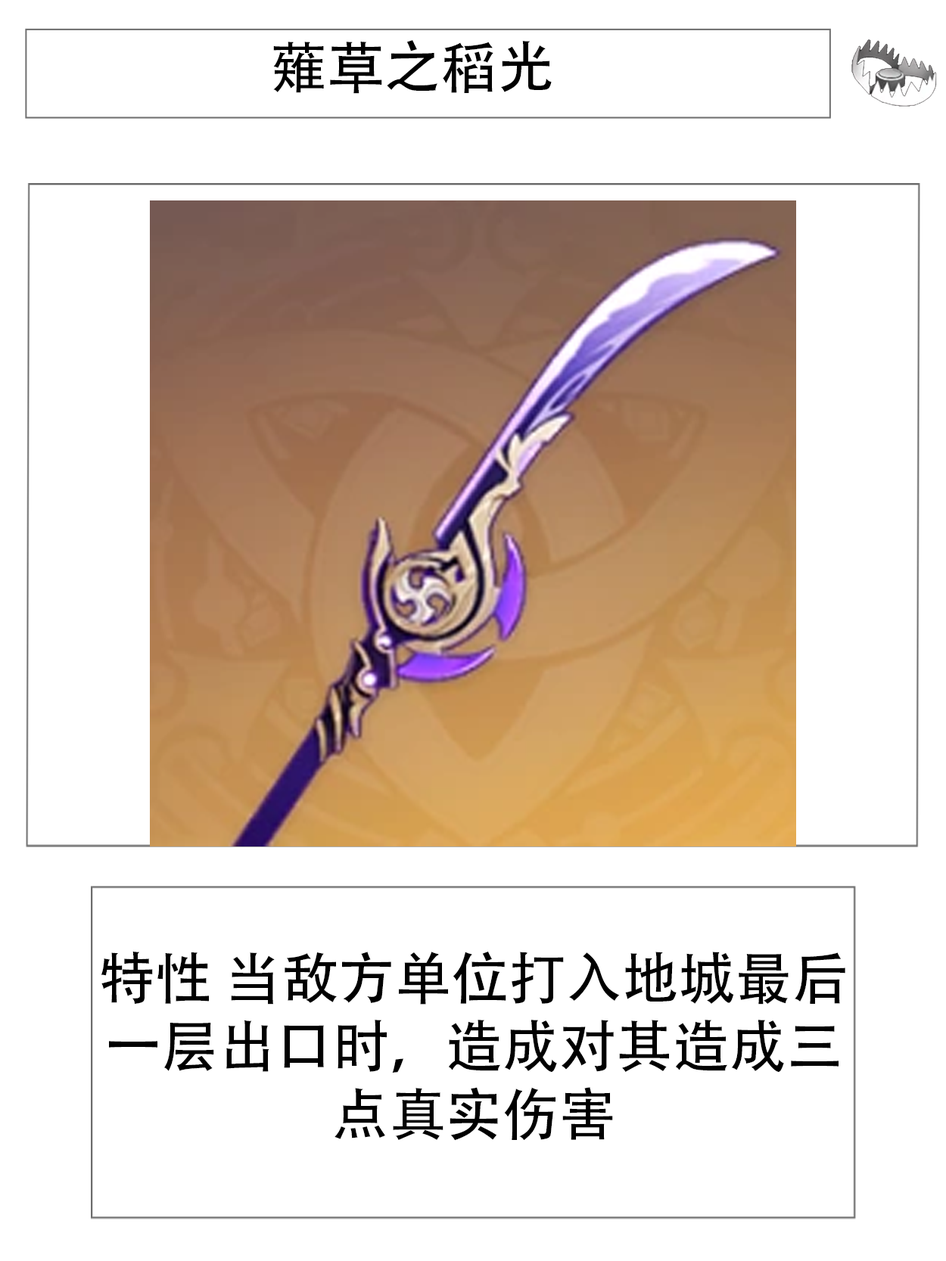
<style>
.page{position:relative;width:946px;height:1261px;background:#ffffff}
.page>*{position:absolute;margin:0}
.t1{font:56.7px "AdobeHeitiStd-Regular";color:#000000}
</style>
<div class="page">
<p class="t1" style="left:273px;top:40px;width:278px;height:54px">薙草之稻光</p>
<p class="t1" style="left:101px;top:951px;width:744px;height:190px;text-align:center">特性 当敌方单位打入地城最后一层出口时，造成对其造成三点真实伤害</p>
</div>
